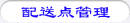
<style>
.page{position:relative;width:130px;height:23px;background:#ffffff}
.page>*{position:absolute;margin:0}
.t1{font:18px "LiSu";color:#1d0cfa}
</style>
<div class="page">
<p class="t1" style="left:21px;top:6px;width:89px;height:12px">配送点管理</p>
</div>
